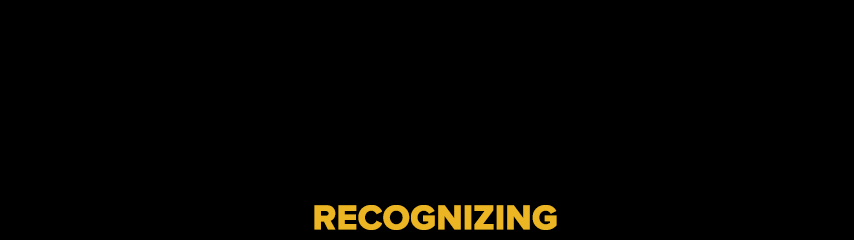
<style>
.page{position:relative;width:854px;height:240px;background:#000000}
.page>*{position:absolute;margin:0}
.t1{font:36px "ProximaNova-Extrabld";color:#ebb524;text-transform:uppercase}
</style>
<div class="page">
<p class="t1" style="left:314px;top:205px;width:243px;height:25px">Recognizing</p>
</div>
